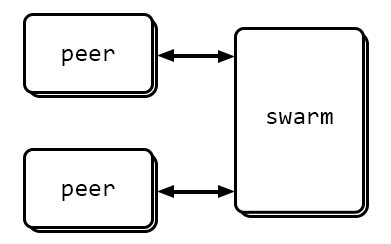
<style>
.page{position:relative;width:391px;height:244px;background:#ffffff}
.page>*{position:absolute;margin:0}
.t1{font:25px "Consolas";color:#000000}
</style>
<div class="page">
<p class="t1" style="left:62px;top:49px;width:53px;height:17px">peer</p>
<p class="t1" style="left:267px;top:112px;width:66px;height:12px">swarm</p>
<p class="t1" style="left:62px;top:184px;width:53px;height:17px">peer</p>
</div>
